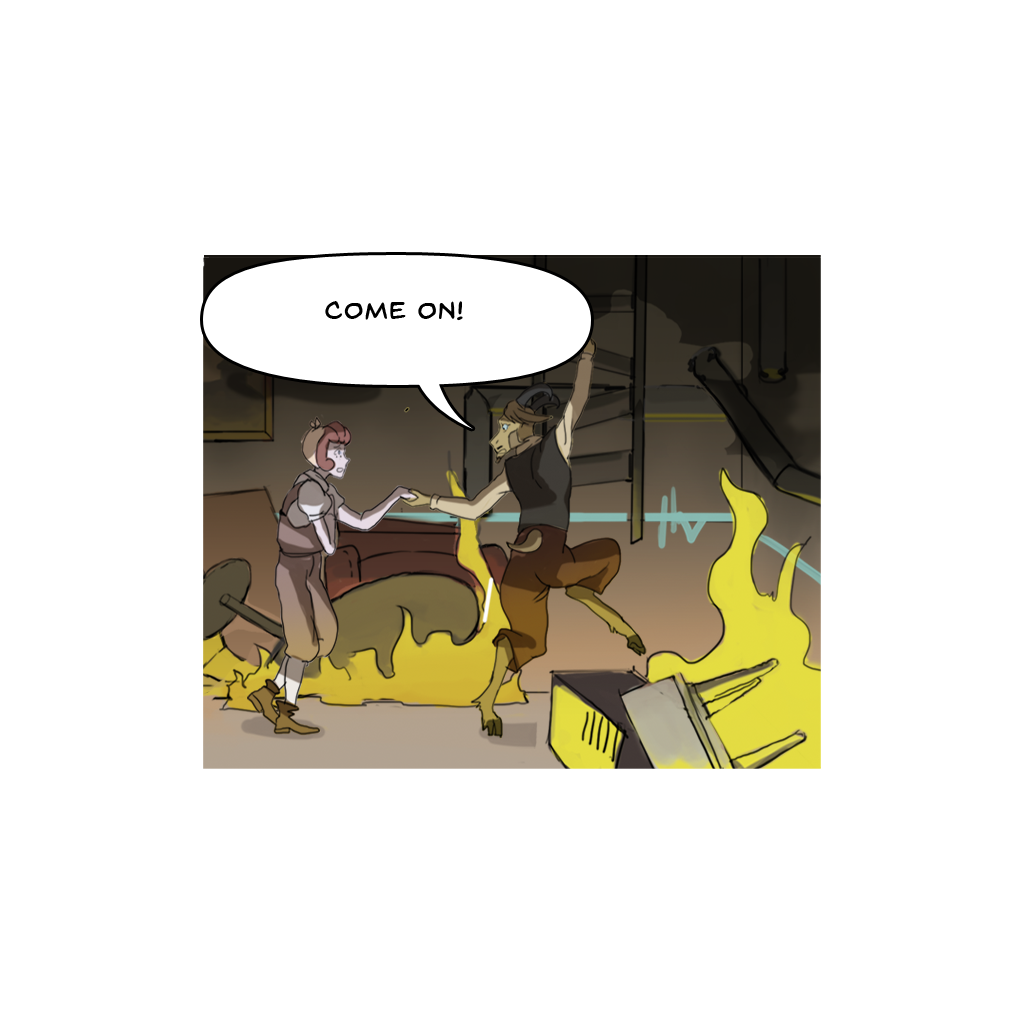
<style>
.page{position:relative;width:1024px;height:1024px;background:#ffffff}
.page>*{position:absolute;margin:0}
.t1{font:25px "BackIssuesBB";letter-spacing:0.05em;color:#000000}
</style>
<div class="page">
<p class="t1" style="left:325px;top:301px;width:138px;height:20px">Come on!</p>
</div>
